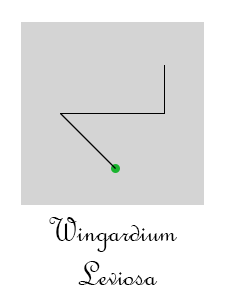
<style>
.page{position:relative;width:225px;height:300px;background:#d4d4d4}
.page>*{position:absolute;margin:0}
.t1{font:36px "FrenchScriptMT";color:#000000}
</style>
<div class="page">
<p class="t1" style="left:49px;top:217px;width:128px;height:68px;text-align:center">Wingardium <br>Leviosa</p>
</div>
